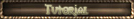
<style>
.page{position:relative;width:134px;height:19px}
.page>*{position:absolute;margin:0}
.t1{font:12px "Morpheus"}
</style>
<div class="page">
<p class="t1" style="left:45px;top:4px;width:44px;height:12px">Tutorial</p>
</div>
